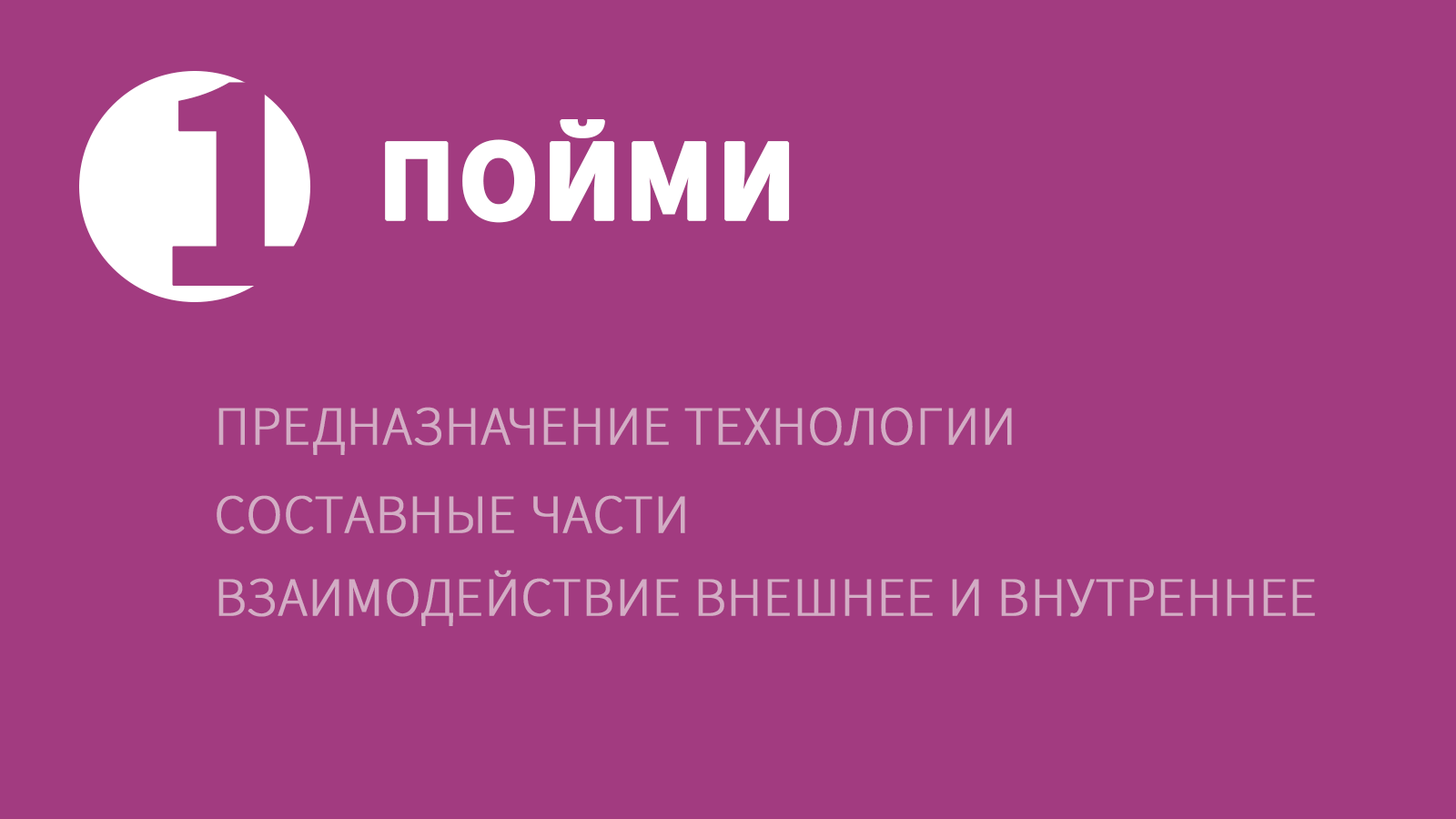
<style>
.page{position:relative;width:1456px;height:819px;background:#a23b80}
.page>*{position:absolute;margin:0}
.t1{font:317.8px "SourceSansPro-Bold";color:#a23b80;text-transform:uppercase;font-weight:bold}
.t2{font:117.4px "SourceSansPro-Bold";color:#ffffff;text-transform:uppercase;font-weight:bold}
.t3{font:54.6px "SourceSansPro-Light";color:#d3adc5;text-transform:uppercase;font-weight:bold}
</style>
<div class="page">
<p class="t1" style="left:172px;top:82px;width:131px;height:204px">1</p>
<p class="t2" style="left:385px;top:119px;width:405px;height:104px">пойми</p>
<p class="t3" style="left:218px;top:407px;width:794px;height:48px">предназначение технологии</p>
<p class="t3" style="left:217px;top:495px;width:468px;height:39px">составные части</p>
<p class="t3" style="left:218px;top:570px;width:1097px;height:56px">взаимодействие внешнее и внутреннее</p>
</div>
